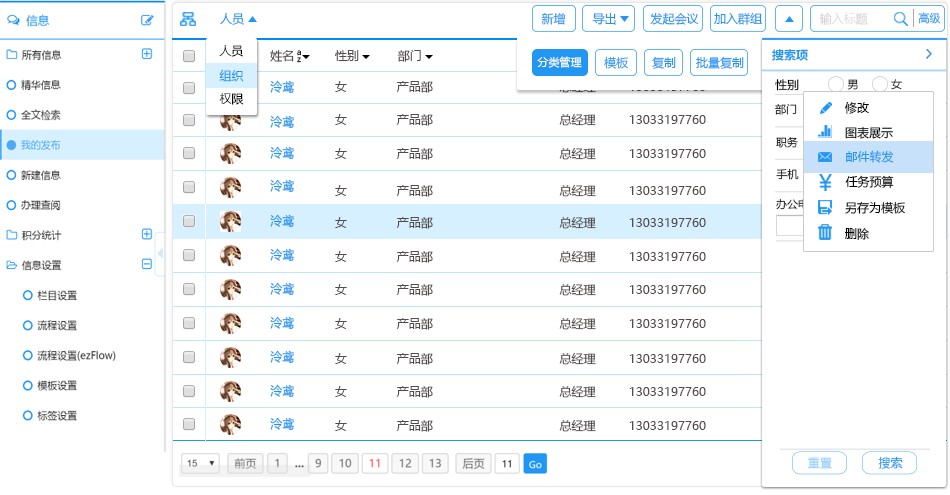
<style>
.page{position:relative;width:950px;height:495px;background:#ffffff}
.page>*{position:absolute;margin:0}
.t1{font:12px "MicrosoftYaHei";color:#2196f3}
.t2{font:12px "MicrosoftYaHei"}
.t3{font:12px "MicrosoftYaHeiLight";color:#dcd6d6}
.t4{font:11px "MicrosoftYaHei";color:#2196f3}
.t5{font:12px "MicrosoftYaHeiLight";color:#000000}
.t6{font:12px "MicrosoftYaHei";color:#544c4c}
.t7{font:8px "MicrosoftYaHei"}
.t8{font:11.8px "MicrosoftYaHei-Bold";color:#2196f3}
.t9{font:11px "MicrosoftYaHei";color:#ffffff}
.t10{font:12px "MicrosoftYaHeiLight";color:#2196f3}
.t11{font:11.8px "MicrosoftYaHei";color:#000000}
.t12{font:10.8px "MicrosoftYaHei"}
.t13{font:12px "MicrosoftYaHei";color:#000000}
.t14{font:10.8px "MicrosoftYaHei";color:#000000}
.t15{font:11.8px "MicrosoftYaHei";color:#93cfff}
.t16{font:11.8px "MicrosoftYaHei";color:#2196f3}
</style>
<div class="page">
<p class="t1" style="left:220px;top:13px;width:24px;height:12px">人员</p>
<p class="t2" style="left:541px;top:13px;width:24px;height:12px">新增</p>
<p class="t1" style="left:592px;top:13px;width:24px;height:12px">导出</p>
<p class="t1" style="left:650px;top:12px;width:49px;height:13px">发起会议</p>
<p class="t1" style="left:713px;top:12px;width:50px;height:13px">加入群组</p>
<p class="t3" style="left:819px;top:12px;width:49px;height:13px">输入标题</p>
<p class="t4" style="left:918px;top:12px;width:23px;height:12px">高级</p>
<p class="t5" style="left:219px;top:45px;width:24px;height:12px">人员</p>
<p class="t6" style="left:270px;top:50px;width:24px;height:12px">姓名</p>
<p class="t7" style="left:297px;top:50px;width:4px;height:6px">a</p>
<p class="t6" style="left:335px;top:50px;width:24px;height:11px">性别</p>
<p class="t6" style="left:397px;top:50px;width:24px;height:12px">部门</p>
<p class="t8" style="left:772px;top:49px;width:36px;height:12px">搜索项</p>
<p class="t7" style="left:297px;top:57px;width:4px;height:6px">z</p>
<p class="t9" style="left:537px;top:56px;width:45px;height:12px">分类管理</p>
<p class="t1" style="left:604px;top:56px;width:24px;height:13px">模板</p>
<p class="t1" style="left:652px;top:56px;width:24px;height:13px">复制</p>
<p class="t1" style="left:696px;top:56px;width:48px;height:13px">批量复制</p>
<p class="t10" style="left:219px;top:69px;width:25px;height:13px">组织</p>
<p class="t1" style="left:270px;top:80px;width:24px;height:13px">泠鸢</p>
<p class="t6" style="left:335px;top:81px;width:12px;height:11px">女</p>
<p class="t6" style="left:396px;top:81px;width:37px;height:12px">产品部</p>
<p class="t11" style="left:775px;top:79px;width:24px;height:12px">性别</p>
<p class="t12" style="left:847px;top:79px;width:11px;height:11px">男</p>
<p class="t12" style="left:891px;top:79px;width:12px;height:11px">女</p>
<p class="t5" style="left:219px;top:93px;width:25px;height:12px">权限</p>
<p class="t13" style="left:844px;top:101px;width:25px;height:13px">修改</p>
<p class="t12" style="left:775px;top:104px;width:22px;height:11px">部门</p>
<p class="t1" style="left:270px;top:115px;width:24px;height:13px">泠鸢</p>
<p class="t6" style="left:335px;top:114px;width:12px;height:11px">女</p>
<p class="t6" style="left:396px;top:114px;width:37px;height:12px">产品部</p>
<p class="t6" style="left:559px;top:114px;width:37px;height:12px">总经理</p>
<p class="t6" style="left:629px;top:115px;width:77px;height:9px">13033197760</p>
<p class="t13" style="left:845px;top:126px;width:48px;height:13px">图表展示</p>
<p class="t14" style="left:776px;top:137px;width:22px;height:11px">职务</p>
<p class="t1" style="left:270px;top:146px;width:24px;height:13px">泠鸢</p>
<p class="t6" style="left:335px;top:148px;width:12px;height:11px">女</p>
<p class="t6" style="left:396px;top:148px;width:37px;height:12px">产品部</p>
<p class="t6" style="left:559px;top:148px;width:37px;height:12px">总经理</p>
<p class="t6" style="left:629px;top:149px;width:77px;height:9px">13033197760</p>
<p class="t1" style="left:846px;top:150px;width:48px;height:13px">邮件转发</p>
<p class="t14" style="left:776px;top:168px;width:23px;height:12px">手机</p>
<p class="t1" style="left:270px;top:179px;width:24px;height:13px">泠鸢</p>
<p class="t6" style="left:335px;top:185px;width:12px;height:11px">女</p>
<p class="t6" style="left:396px;top:185px;width:37px;height:12px">产品部</p>
<p class="t6" style="left:559px;top:185px;width:37px;height:12px">总经理</p>
<p class="t13" style="left:845px;top:175px;width:49px;height:13px">任务预算</p>
<p class="t6" style="left:629px;top:186px;width:77px;height:9px">13033197760</p>
<p class="t12" style="left:776px;top:198px;width:44px;height:12px">办公电话</p>
<p class="t13" style="left:845px;top:201px;width:60px;height:13px">另存为模板</p>
<p class="t1" style="left:270px;top:214px;width:24px;height:13px">泠鸢</p>
<p class="t6" style="left:335px;top:217px;width:12px;height:11px">女</p>
<p class="t6" style="left:396px;top:217px;width:37px;height:12px">产品部</p>
<p class="t6" style="left:559px;top:217px;width:37px;height:12px">总经理</p>
<p class="t6" style="left:629px;top:218px;width:77px;height:9px">13033197760</p>
<p class="t13" style="left:845px;top:228px;width:24px;height:12px">删除</p>
<p class="t1" style="left:270px;top:248px;width:24px;height:13px">泠鸢</p>
<p class="t6" style="left:335px;top:251px;width:12px;height:11px">女</p>
<p class="t6" style="left:396px;top:251px;width:37px;height:12px">产品部</p>
<p class="t6" style="left:559px;top:251px;width:37px;height:12px">总经理</p>
<p class="t6" style="left:629px;top:252px;width:77px;height:9px">13033197760</p>
<p class="t1" style="left:270px;top:282px;width:24px;height:13px">泠鸢</p>
<p class="t6" style="left:335px;top:284px;width:12px;height:11px">女</p>
<p class="t6" style="left:396px;top:284px;width:37px;height:12px">产品部</p>
<p class="t6" style="left:559px;top:284px;width:37px;height:12px">总经理</p>
<p class="t6" style="left:629px;top:285px;width:77px;height:9px">13033197760</p>
<p class="t1" style="left:270px;top:316px;width:24px;height:13px">泠鸢</p>
<p class="t6" style="left:335px;top:318px;width:12px;height:11px">女</p>
<p class="t6" style="left:396px;top:318px;width:37px;height:12px">产品部</p>
<p class="t6" style="left:559px;top:318px;width:37px;height:12px">总经理</p>
<p class="t6" style="left:629px;top:319px;width:77px;height:9px">13033197760</p>
<p class="t1" style="left:270px;top:350px;width:24px;height:13px">泠鸢</p>
<p class="t6" style="left:335px;top:353px;width:12px;height:11px">女</p>
<p class="t6" style="left:396px;top:353px;width:37px;height:12px">产品部</p>
<p class="t6" style="left:559px;top:353px;width:37px;height:12px">总经理</p>
<p class="t6" style="left:629px;top:354px;width:77px;height:9px">13033197760</p>
<p class="t1" style="left:270px;top:384px;width:24px;height:13px">泠鸢</p>
<p class="t6" style="left:335px;top:386px;width:12px;height:11px">女</p>
<p class="t6" style="left:396px;top:386px;width:37px;height:12px">产品部</p>
<p class="t6" style="left:559px;top:386px;width:37px;height:12px">总经理</p>
<p class="t6" style="left:629px;top:387px;width:77px;height:9px">13033197760</p>
<p class="t1" style="left:270px;top:417px;width:24px;height:13px">泠鸢</p>
<p class="t6" style="left:335px;top:420px;width:12px;height:11px">女</p>
<p class="t6" style="left:396px;top:420px;width:37px;height:12px">产品部</p>
<p class="t6" style="left:559px;top:420px;width:37px;height:12px">总经理</p>
<p class="t6" style="left:629px;top:421px;width:77px;height:9px">13033197760</p>
<p class="t15" style="left:807px;top:457px;width:25px;height:12px">重置</p>
<p class="t16" style="left:878px;top:456px;width:25px;height:13px">搜索</p>
</div>
